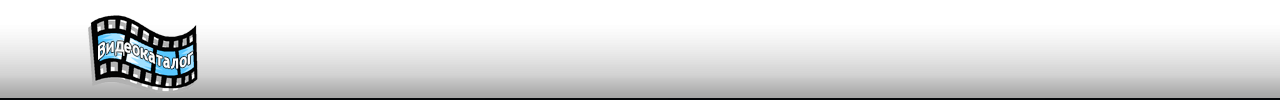
<style>
.page{position:relative;width:1280px;height:100px;background:#ffffff}
.page>*{position:absolute;margin:0}
.t1{font:19.8px "TrebuchetMS-Bold";color:#fdfefe;scale:0.73 1}
</style>
<div class="page">
<p class="t1" style="left:98px;top:41px;width:95px;height:28px">Видеокаталог</p>
</div>
